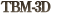
<style>
.page{position:relative;width:75px;height:13px;background:#ffffff}
.page>*{position:absolute;margin:0}
.t1{font:15px "RyuminPro-ExBold";letter-spacing:-0.08em;color:#4a3f32;font-weight:bold;scale:0.9 1}
</style>
<div class="page">
<p class="t1" style="left:0px;top:1px;width:51px;height:12px">TBM-3D</p>
</div>
